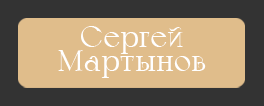
<style>
.page{position:relative;width:264px;height:106px;background:#e0bd8b}
.page>*{position:absolute;margin:0}
.t1{font:30px/24px "Calypso-Regular";color:#ffffff}
</style>
<div class="page">
<p class="t1" style="left:58px;top:26px;width:148px;height:52px;text-align:center">Сергей <br>Мартынов</p>
</div>
